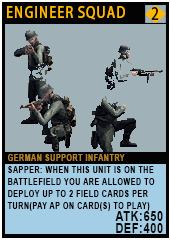
<style>
.page{position:relative;width:170px;height:241px;background:#a0b2b8}
.page>*{position:absolute;margin:0}
.t1{font:15.1px "AdobeHeitiStd-Regular";letter-spacing:0.08em;color:#ffb800;text-transform:uppercase;scale:0.86 1}
.t2{font:16.2px "AdobeHeitiStd-Regular";letter-spacing:0.08em;color:#150f14;text-transform:uppercase;scale:0.86 1}
.t3{font:9.3px/12px "Arial-BoldMT";letter-spacing:0.08em;color:#020100;text-transform:uppercase;scale:0.76 1}
.t4{font:9.3px/20.2px "Arial-BoldMT";letter-spacing:0.08em;color:#b4832c;text-transform:uppercase;scale:0.76 1}
.t5{font:13.9px/12px "Arial-BoldMT";letter-spacing:0.08em;color:#050606;text-transform:uppercase;scale:0.76 1}
</style>
<div class="page">
<p class="t1" style="left:7px;top:6px;width:118px;height:14px">Engineer Squad</p>
<p class="t2" style="left:151px;top:7px;width:8px;height:13px">2</p>
<p class="t3" style="left:7px;top:154px;width:156px;height:79px"><span class="t4">german support infantry<br></span>sapper: when this unit is on the battlefield you are allowed to Deploy up to 2 field cards per turn(pay AP on card(s) to play)<br><span class="t5">atk:650<br>def:400</span></p>
</div>
